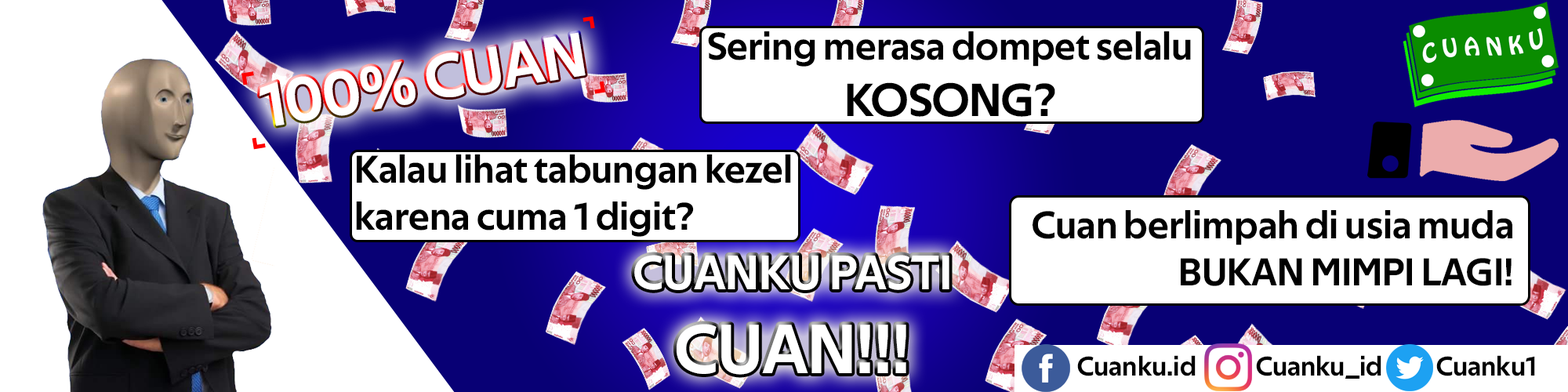
<style>
.page{position:relative;width:1568px;height:392px;background:#ffffff}
.page>*{position:absolute;margin:0}
.t1{font:62.8px "TechnaSans-Regular";color:#ffffff}
.t2{font:39.2px "TechnaSans-Regular";color:#000000}
.t3{font:47px "TechnaSans-Regular";color:#000000}
.t4{font:48.9px "TechnaSans-Regular";color:#ffffff}
.t5{font:70.4px "TechnaSans-Regular";color:#ffffff}
.t6{font:27.4px "TechnaSans-Regular";color:#000000}
</style>
<div class="page">
<p class="t1" style="left:260px;top:32px;width:326px;height:94px;rotate:-9deg">100% CUAN</p>
<p class="t2" style="left:708px;top:31px;width:483px;height:86px;text-align:center">Sering merasa dompet selalu <span class="t3">KOSONG?</span></p>
<p class="t2" style="left:356px;top:154px;width:435px;height:83px">Kalau lihat tabungan kezel karena cuma 1 digit?</p>
<p class="t2" style="left:1033px;top:210px;width:479px;height:76px;text-align:right">Cuan berlimpah di usia muda<br>BUKAN MIMPI LAGI!</p>
<p class="t4" style="left:634px;top:255px;width:315px;height:120px;text-align:center">CUANKU PASTI <span class="t5">CUAN!!!</span></p>
<p class="t6" style="left:1077px;top:355px;width:119px;height:21px">Cuanku.id</p>
<p class="t6" style="left:1256px;top:355px;width:125px;height:24px">Cuanku_id</p>
<p class="t6" style="left:1436px;top:355px;width:99px;height:21px">Cuanku1</p>
</div>
